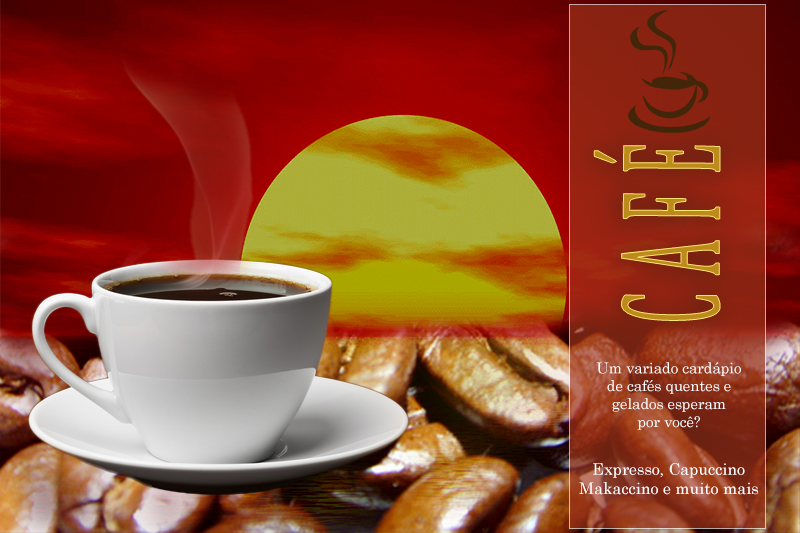
<style>
.page{position:relative;width:800px;height:533px}
.page>*{position:absolute;margin:0}
.t1{font:144.3px "Cambria";letter-spacing:0.33em;color:#bb8b1b;scale:0.38 1}
.t2{font:14.9px "CenturySchoolbook";color:#ffffff}
.t3{font:16px "CenturySchoolbook";color:#ffffff}
</style>
<div class="page">
<p class="t1" style="left:594px;top:145px;width:126px;height:176px;rotate:-90deg">CAFÉ</p>
<p class="t2" style="left:596px;top:362px;width:145px;height:68px;text-align:center">Um variado cardápio de cafés quentes e gelados esperam <br>por você?</p>
<p class="t3" style="left:579px;top:463px;width:179px;height:32px;text-align:center">Expresso, Capuccino Makaccino e muito mais</p>
</div>
